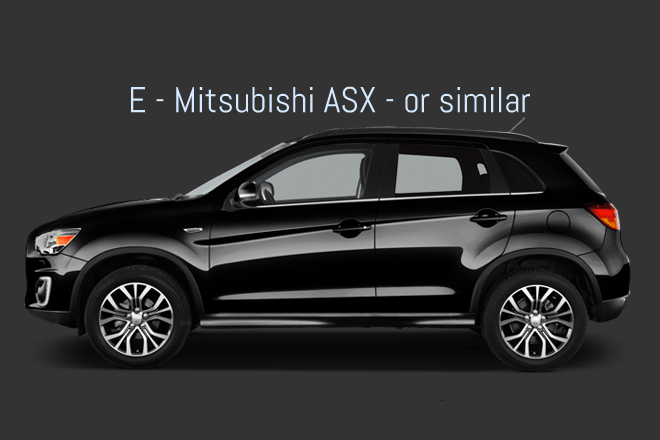
<style>
.page{position:relative;width:660px;height:440px;background:#333333}
.page>*{position:absolute;margin:0}
.t1{font:36px "Abel-Regular";color:#d5e9ff}
</style>
<div class="page">
<p class="t1" style="left:130px;top:86px;width:401px;height:27px">E - Mitsubishi ASX - or similar</p>
</div>
